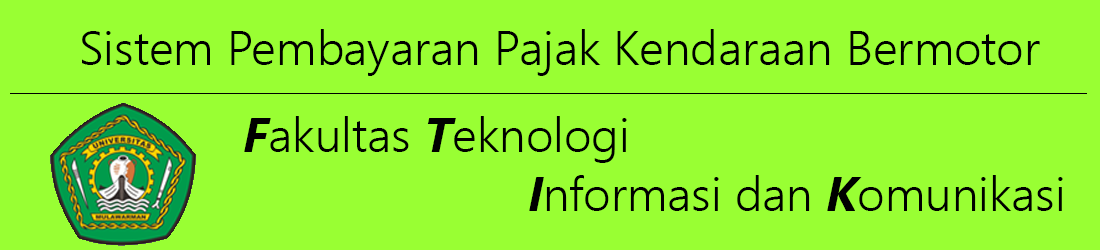
<style>
.page{position:relative;width:1100px;height:250px;background:#99ff33}
.page>*{position:absolute;margin:0}
.t1{font:48px "SegoeUI-Semilight";color:#000000}
.t2{font:48px "SegoeUI-BoldItalic";color:#000000}
</style>
<div class="page">
<p class="t1" style="left:82px;top:29px;width:958px;height:47px">Sistem Pembayaran Pajak Kendaraan Bermotor</p>
<p class="t1" style="left:244px;top:116px;width:383px;height:47px"><span class="t2">F</span>akultas <span class="t2">T</span>eknologi</p>
<p class="t1" style="left:529px;top:175px;width:534px;height:36px"><span class="t2">I</span>nformasi dan <span class="t2">K</span>omunikasi</p>
</div>
